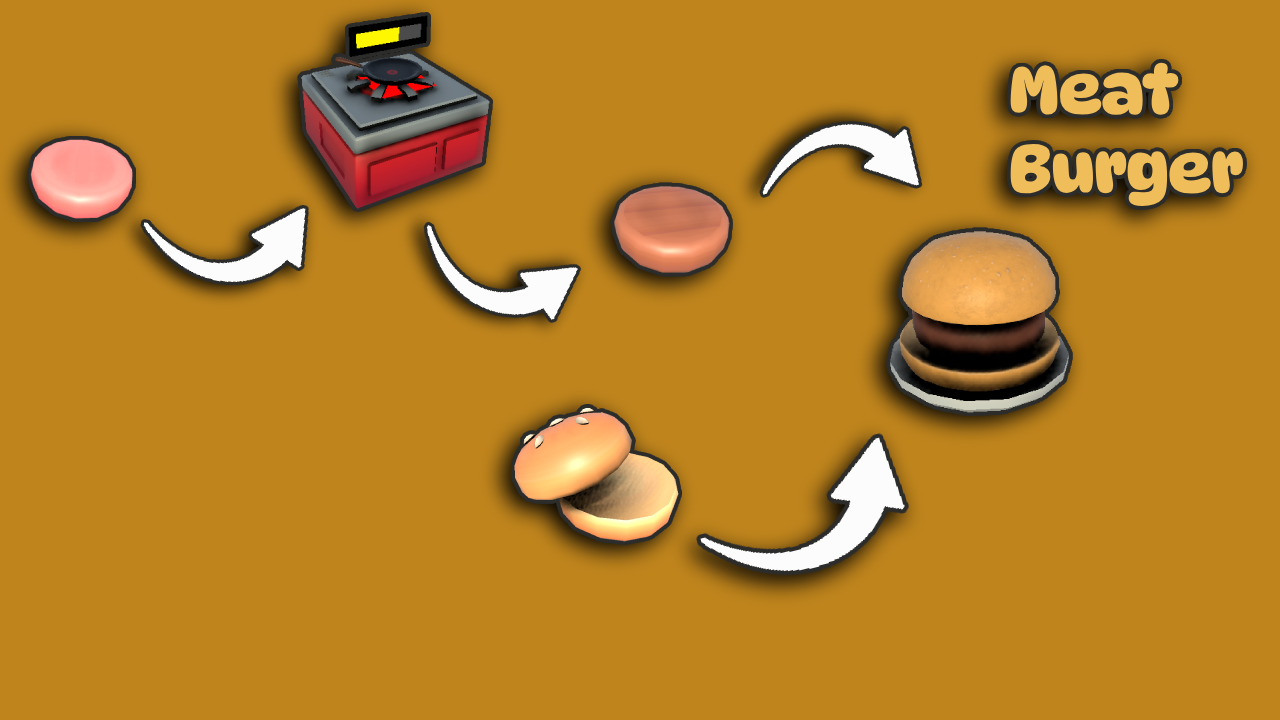
<style>
.page{position:relative;width:1280px;height:720px;background:#bf841c}
.page>*{position:absolute;margin:0}
.t1{font:66.2px "DynaPuff-Bold";color:#f0bd5b}
</style>
<div class="page">
<p class="t1" style="left:1010px;top:62px;width:233px;height:144px">Meat<br>Burger</p>
</div>
